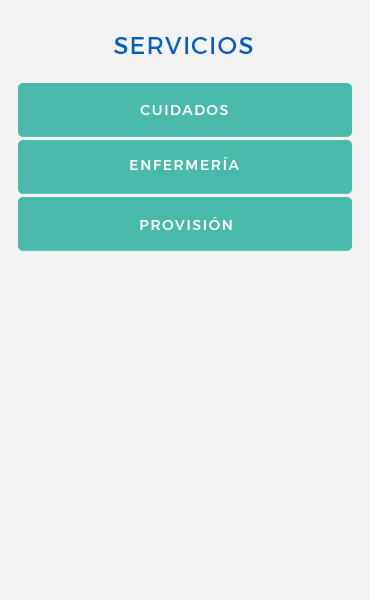
<style>
.page{position:relative;width:370px;height:600px;background:#f4f4f4}
.page>*{position:absolute;margin:0}
.t1{font:24.4px "Montserrat-Regular";letter-spacing:0.04em;color:#005fb8;text-transform:uppercase}
.t2{font:14px "Montserrat-Regular";letter-spacing:0.12em;color:#ffffff;text-transform:uppercase}
</style>
<div class="page">
<p class="t1" style="left:114px;top:37px;width:139px;height:17px">servicios</p>
<p class="t2" style="left:140px;top:105px;width:88px;height:10px">cuidados</p>
<p class="t2" style="left:130px;top:157px;width:109px;height:13px">enfermería</p>
<p class="t2" style="left:140px;top:217px;width:92px;height:13px">provisión</p>
</div>
